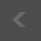
<style>
.page{position:relative;width:41px;height:41px;background:#4c4c4c}
.page>*{position:absolute;margin:0}
.t1{font:40px "Cabin-Bold";color:#696969}
</style>
<div class="page">
<p class="t1" style="left:12px;top:11px;width:15px;height:17px">&lt;</p>
</div>
